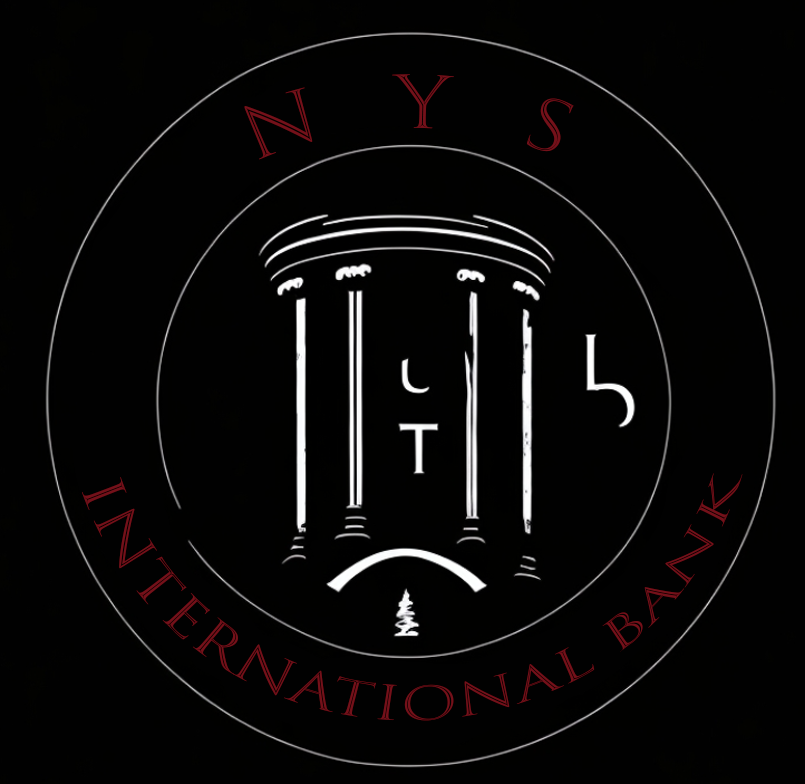
<style>
.page{position:relative;width:805px;height:784px;background:#010101}
.page>*{position:absolute;margin:0}
.t1{font:70.9px "TrajanColor-Concept";color:#74111a}
.t2{font:46.1px "TrajanColor-Concept";color:#74111a}
</style>
<div class="page">
<p class="t1" style="left:244px;top:74px;width:330px;height:86px;rotate:-1deg">N   Y   S</p>
<p class="t2" style="left:82px;top:473px;width:661px;height:248px;rotate:-1deg">International Bank</p>
</div>
